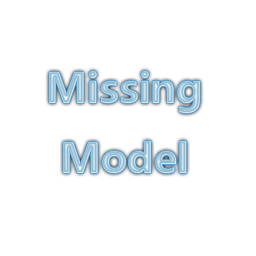
<style>
.page{position:relative;width:256px;height:256px;background:#ffffff}
.page>*{position:absolute;margin:0}
.t1{font:40px "MicrosoftYaHei"}
</style>
<div class="page">
<p class="t1" style="left:49px;top:71px;width:151px;height:102px;text-align:center">Missing Model</p>
</div>
